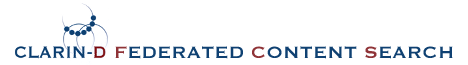
<style>
.page{position:relative;width:468px;height:65px;background:#ffffff}
.page>*{position:absolute;margin:0}
.t1{font:21.5px "Copperplate";color:#0f4172}
.t2{font:21.5px "Copperplate";color:#8f3337}
</style>
<div class="page">
<p class="t1" style="left:115px;top:46px;width:338px;height:13px"><span class="t2">F</span>EDERATED <span class="t2">C</span>ONTENT <span class="t2">S</span>EARCH</p>
</div>
